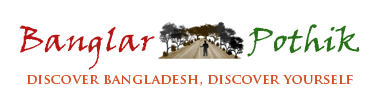
<style>
.page{position:relative;width:375px;height:100px;background:#ffffff}
.page>*{position:absolute;margin:0}
.t1{font:32px "VinerHandITC";color:#b61515;scale:1.07 1}
.t2{font:32px "VinerHandITC";color:#277118;scale:1.07 1}
.t3{font:14px "TrajanPro-Bold";color:#d14f22}
</style>
<div class="page">
<p class="t1" style="left:19px;top:24px;width:341px;height:46px">Banglar            <span class="t2">Pothik</span></p>
<p class="t3" style="left:26px;top:75px;width:327px;height:11px">discover bangladesh, discover yourself</p>
</div>
